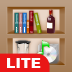
<style>
.page{position:relative;width:72px;height:72px}
.page>*{position:absolute;margin:0}
.t1{font:13.9px "Arial-Black";color:#ffffff}
</style>
<div class="page">
<p class="t1" style="left:7px;top:58px;width:34px;height:10px">LITE</p>
</div>
